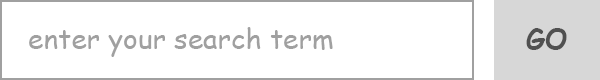
<style>
.page{position:relative;width:600px;height:80px;background:#ffffff}
.page>*{position:absolute;margin:0}
.t1{font:28px "ComicSansMS";color:#a0a0a0}
.t2{font:28px "ComicSansMS-Bold";color:#505050}
</style>
<div class="page">
<p class="t1" style="left:29px;top:27px;width:304px;height:30px">enter your search term</p>
<p class="t2" style="left:526px;top:28px;width:41px;height:22px">GO</p>
</div>
